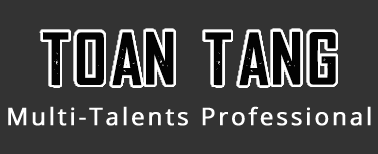
<style>
.page{position:relative;width:378px;height:154px;background:#333333}
.page>*{position:absolute;margin:0}
.t1{font:60px "WeareDepraved";letter-spacing:0.1em;color:#030303;font-weight:bold}
.t2{font:24px "OpenSans";letter-spacing:0.1em;color:#ffffff;font-weight:bold}
</style>
<div class="page">
<p class="t1" style="left:42px;top:31px;width:294px;height:55px">TOAN TANG</p>
<p class="t2" style="left:8px;top:106px;width:363px;height:20px">Multi-Talents Professional</p>
</div>
